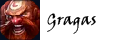
<style>
.page{position:relative;width:140px;height:40px;background:#ffffff}
.page>*{position:absolute;margin:0}
.t1{font:12px "VinerHandITC";color:#000000}
</style>
<div class="page">
<p class="t1" style="left:47px;top:13px;width:49px;height:21px">Gragas</p>
</div>
